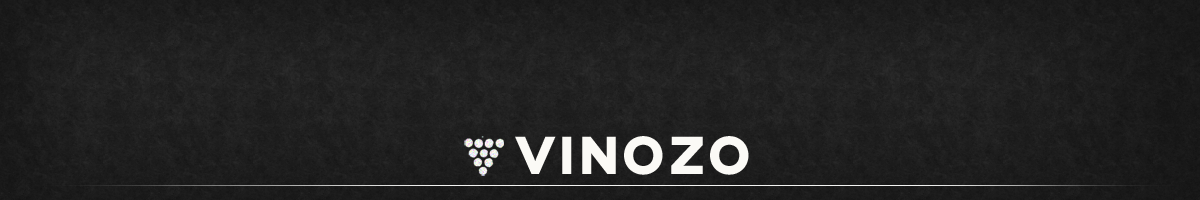
<style>
.page{position:relative;width:1200px;height:200px}
.page>*{position:absolute;margin:0}
.t1{font:53.3px "Novecentowide-Bold";letter-spacing:0.05em;color:#fbfaf6}
</style>
<div class="page">
<p class="t1" style="left:515px;top:136px;width:234px;height:39px">VINOZO</p>
</div>
